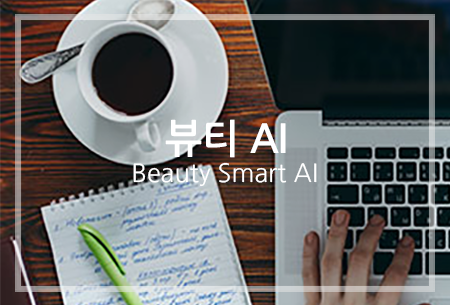
<style>
.page{position:relative;width:450px;height:305px}
.page>*{position:absolute;margin:0}
.t1{font:39.5px "NanumGothicBold";color:#ffffff}
.t2{font:25.3px "NanumGothic";color:#ffffff}
</style>
<div class="page">
<p class="t1" style="left:165px;top:119px;width:121px;height:39px">뷰티 AI</p>
<p class="t2" style="left:133px;top:162px;width:184px;height:25px">Beauty Smart AI</p>
</div>
